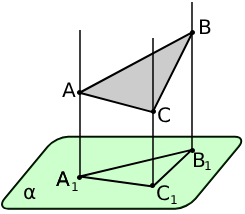
<style>
.page{position:relative;width:245px;height:214px;background:#ffffff}
.page>*{position:absolute;margin:0}
.t1{font:20px "DejaVuSans";color:#000000}
.t2{font:12px "DejaVuSans";color:#000000}
</style>
<div class="page">
<p class="t1" style="left:200px;top:19px;width:11px;height:15px">B</p>
<p class="t1" style="left:62px;top:82px;width:14px;height:15px">A</p>
<p class="t1" style="left:158px;top:107px;width:12px;height:16px">C</p>
<p class="t1" style="left:194px;top:152px;width:11px;height:15px">B</p>
<p class="t2" style="left:205px;top:161px;width:6px;height:9px">1</p>
<p class="t1" style="left:56px;top:171px;width:14px;height:15px">A</p>
<p class="t1" style="left:56px;top:171px;width:14px;height:15px">A</p>
<p class="t2" style="left:72px;top:182px;width:6px;height:9px">1</p>
<p class="t1" style="left:157px;top:185px;width:12px;height:16px">C</p>
<p class="t1" style="left:24px;top:187px;width:12px;height:13px">α</p>
<p class="t2" style="left:171px;top:195px;width:6px;height:9px">1</p>
</div>
